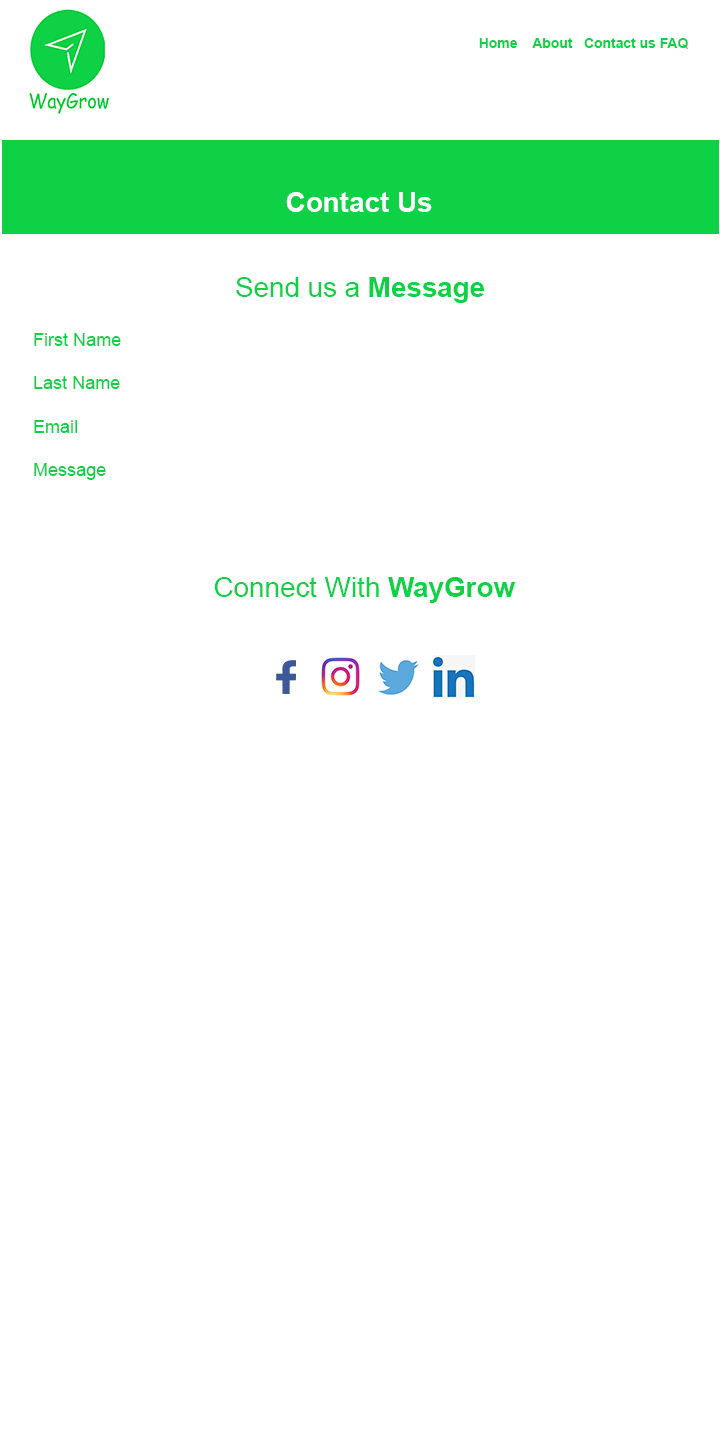
<style>
.page{position:relative;width:720px;height:1440px;background:#ffffff}
.page>*{position:absolute;margin:0}
.t1{font:13.9px "Arial-BoldMT";color:#0ed145}
.t2{font:27.8px "Arial-BoldMT";color:#ffffff}
.t3{font:27.8px "ArialMT";color:#0ed145}
.t4{font:27.8px "Arial-BoldMT";color:#0ed145}
.t5{font:18.1px "ArialMT";color:#0ed145}
</style>
<div class="page">
<p class="t1" style="left:479px;top:38px;width:209px;height:11px">Home    About   Contact us FAQ</p>
<p class="t2" style="left:286px;top:192px;width:146px;height:20px">Contact Us</p>
<p class="t3" style="left:236px;top:277px;width:248px;height:26px">Send us a <span class="t4">Message</span></p>
<p class="t5" style="left:34px;top:333px;width:87px;height:147px">First Name<br><br>Last Name<br><br>Email<br><br>Message</p>
<p class="t3" style="left:214px;top:577px;width:302px;height:26px">Connect With <span class="t4">WayGrow</span></p>
</div>
